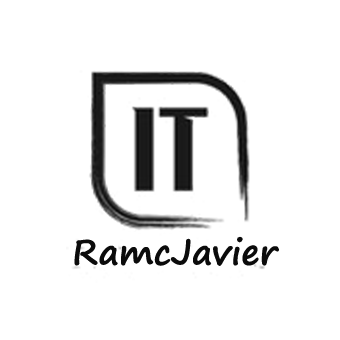
<style>
.page{position:relative;width:340px;height:340px;background:#ffffff}
.page>*{position:absolute;margin:0}
.t1{font:34.9px "SegoePrint-Bold";color:#0b0b0b}
</style>
<div class="page">
<p class="t1" style="left:74px;top:236px;width:205px;height:30px">RamcJavier</p>
</div>
